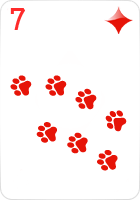
<style>
.page{position:relative;width:140px;height:200px;background:#ffffff}
.page>*{position:absolute;margin:0}
.t1{font:26px "CardCharacters";color:#ff2b2b}
</style>
<div class="page">
<p class="t1" style="left:10px;top:8px;width:15px;height:22px">7</p>
</div>
